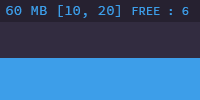
<style>
.page{position:relative;width:200px;height:100px;background:#3d9ee9}
.page>*{position:absolute;margin:0}
.t1{font:14px "SourceCodePro-Regular";color:#3d9ee9}
.t2{font:12px "SourceCodePro-Regular";color:#3d9ee9}
</style>
<div class="page">
<p class="t1" style="left:6px;top:5px;width:183px;height:13px">60 MB [10, 20] <span class="t2">FREE : 6</span></p>
</div>
